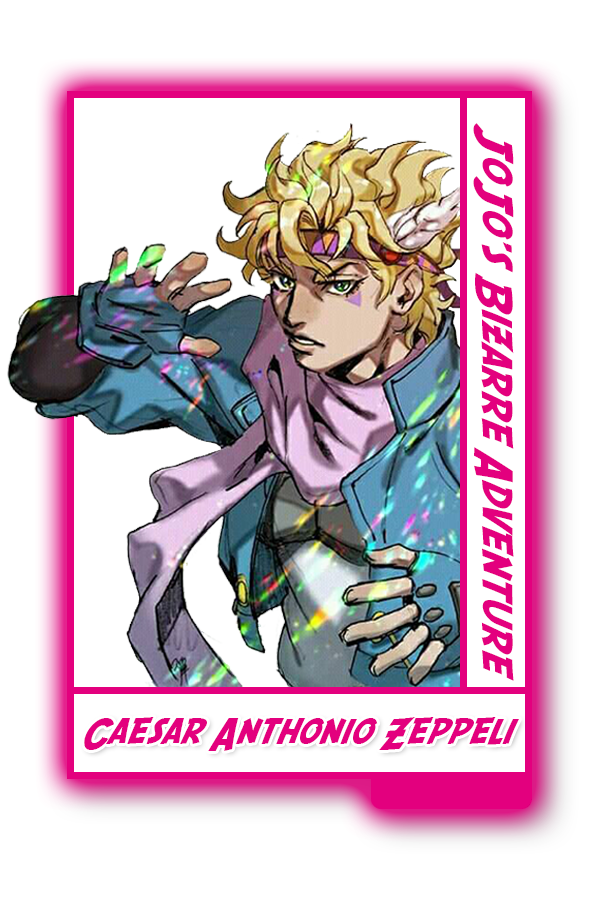
<style>
.page{position:relative;width:600px;height:900px;background:#ffffff}
.page>*{position:absolute;margin:0}
.t1{font:42.4px "SFFedora";color:#e3007e}
.t2{font:35.7px "SFFedora";color:#e3007e}
</style>
<div class="page">
<p class="t1" style="left:473px;top:123px;width:41px;height:558px;rotate:90deg">JoJo's Bizarre Adventure</p>
<p class="t2" style="left:84px;top:717px;width:435px;height:34px">Caesar Anthonio Zeppeli</p>
</div>
